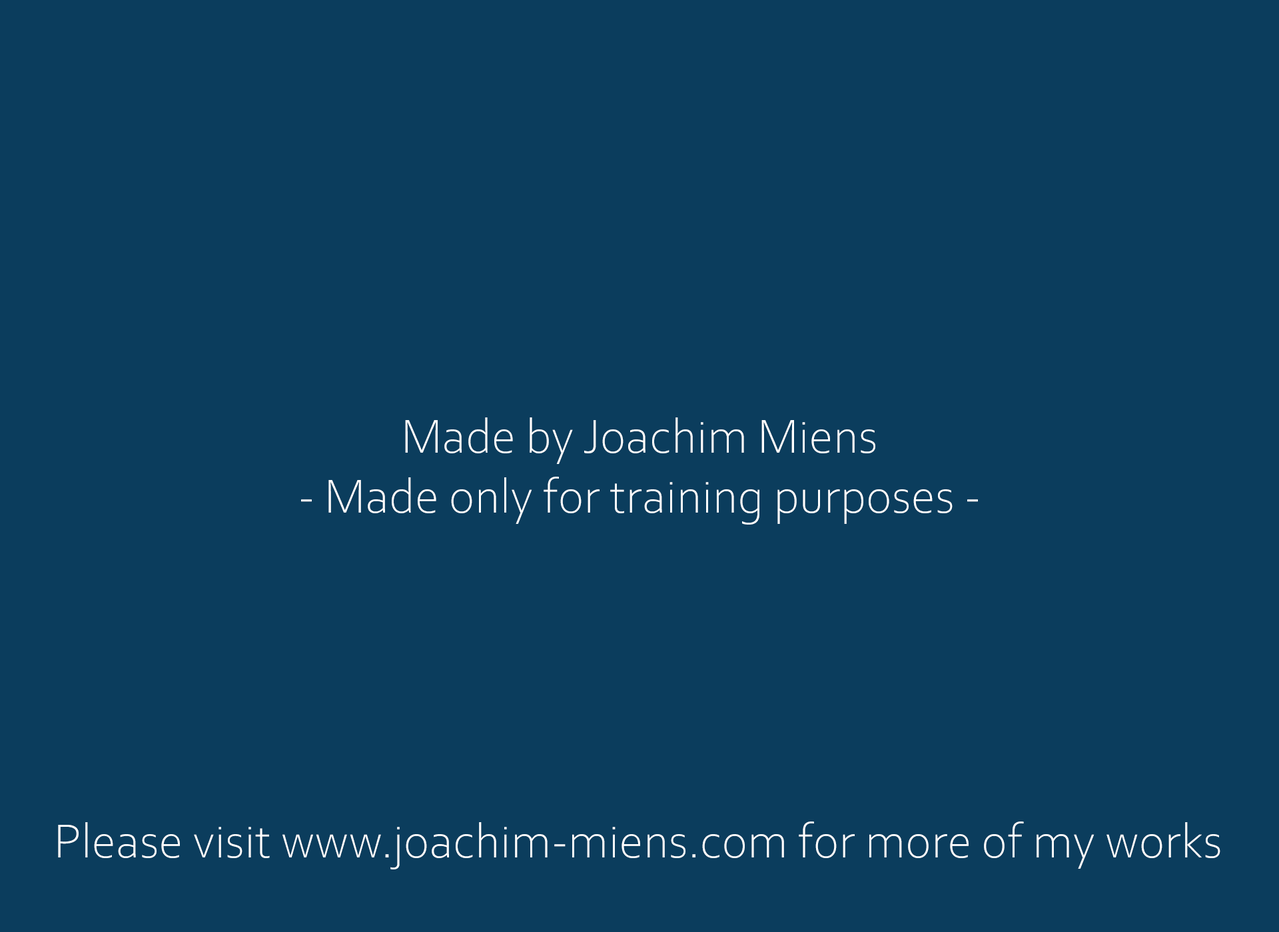
<style>
.page{position:relative;width:1279px;height:932px;background:#0b3d5d}
.page>*{position:absolute;margin:0}
.t1{font:50px "CorbelLight";color:#ffffff}
</style>
<div class="page">
<p class="t1" style="left:301px;top:418px;width:677px;height:107px;text-align:center">Made by Joachim Miens<br>- Made only for training purposes -</p>
<p class="t1" style="left:58px;top:822px;width:1162px;height:48px">Please visit www.joachim-miens.com for more of my works</p>
</div>
